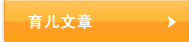
<style>
.page{position:relative;width:189px;height:42px}
.page>*{position:absolute;margin:0}
.t1{font:16px "SimHei";color:#ffffff;font-weight:bold}
</style>
<div class="page">
<p class="t1" style="left:28px;top:14px;width:64px;height:15px">育儿文章</p>
</div>
